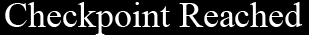
<style>
.page{position:relative;width:309px;height:35px;background:#000000}
.page>*{position:absolute;margin:0}
.t1{font:36px "TimesNewRomanPSMT";color:#ffffff}
</style>
<div class="page">
<p class="t1" style="left:5px;top:2px;width:298px;height:33px">Checkpoint Reached</p>
</div>
